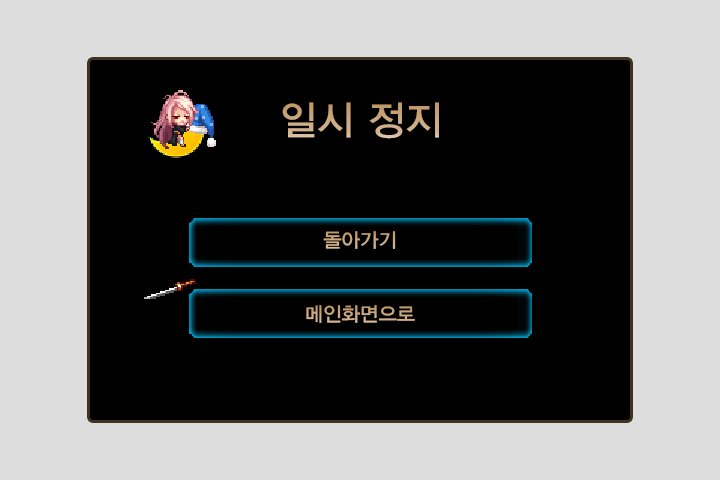
<style>
.page{position:relative;width:720px;height:480px;background:#000000}
.page>*{position:absolute;margin:0}
.t1{font:40px "YDIYGO330";color:#cba87f}
.t2{font:20px "YDIYGO330";color:#cba87f}
</style>
<div class="page">
<p class="t1" style="left:282px;top:102px;width:157px;height:37px">일시 정지</p>
<p class="t2" style="left:323px;top:231px;width:73px;height:18px">돌아가기</p>
<p class="t2" style="left:306px;top:305px;width:109px;height:18px">메인화면으로</p>
</div>
